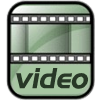
<style>
.page{position:relative;width:100px;height:100px}
.page>*{position:absolute;margin:0}
.t1{font:28px "HandelGothic";color:#283827;font-style:italic}
</style>
<div class="page">
<p class="t1" style="left:16px;top:68px;width:72px;height:21px">video</p>
</div>
